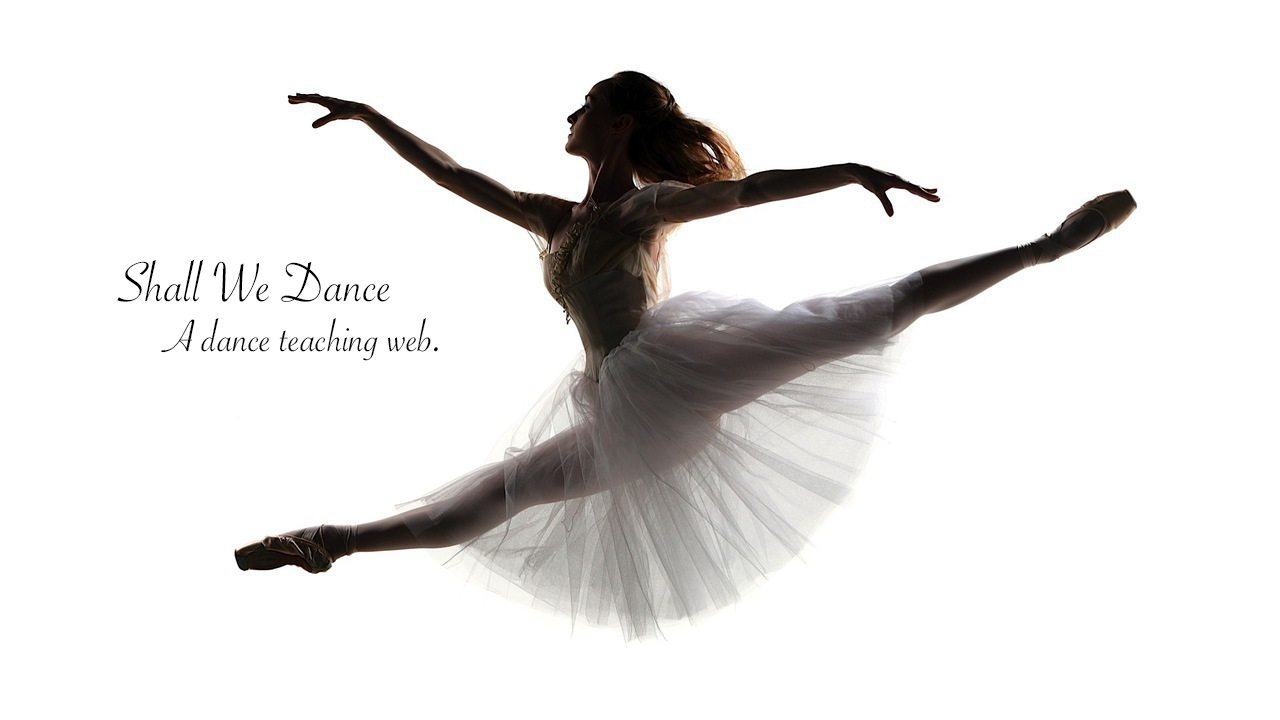
<style>
.page{position:relative;width:1280px;height:720px;background:#ffffff}
.page>*{position:absolute;margin:0}
.t1{font:60px "SavoyeLetPlain";color:#000000}
.t2{font:48px "SavoyeLetPlain";color:#000000}
</style>
<div class="page">
<p class="t1" style="left:117px;top:259px;width:273px;height:43px">Shall We Dance</p>
<p class="t2" style="left:161px;top:318px;width:277px;height:43px">A dance teaching web.</p>
</div>
